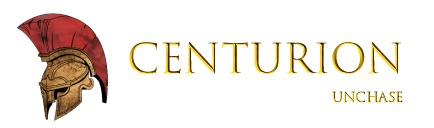
<style>
.page{position:relative;width:434px;height:128px;background:#ffffff}
.page>*{position:absolute;margin:0}
.t1{font:40px/29.3px "TrajanColor-Concept"}
.t2{font:13.3px/29.3px "TrajanColor-Concept"}
</style>
<div class="page">
<p class="t1" style="left:129px;top:42px;width:274px;height:61px;text-align:right">Centurion<br><span class="t2">unchase</span></p>
</div>
